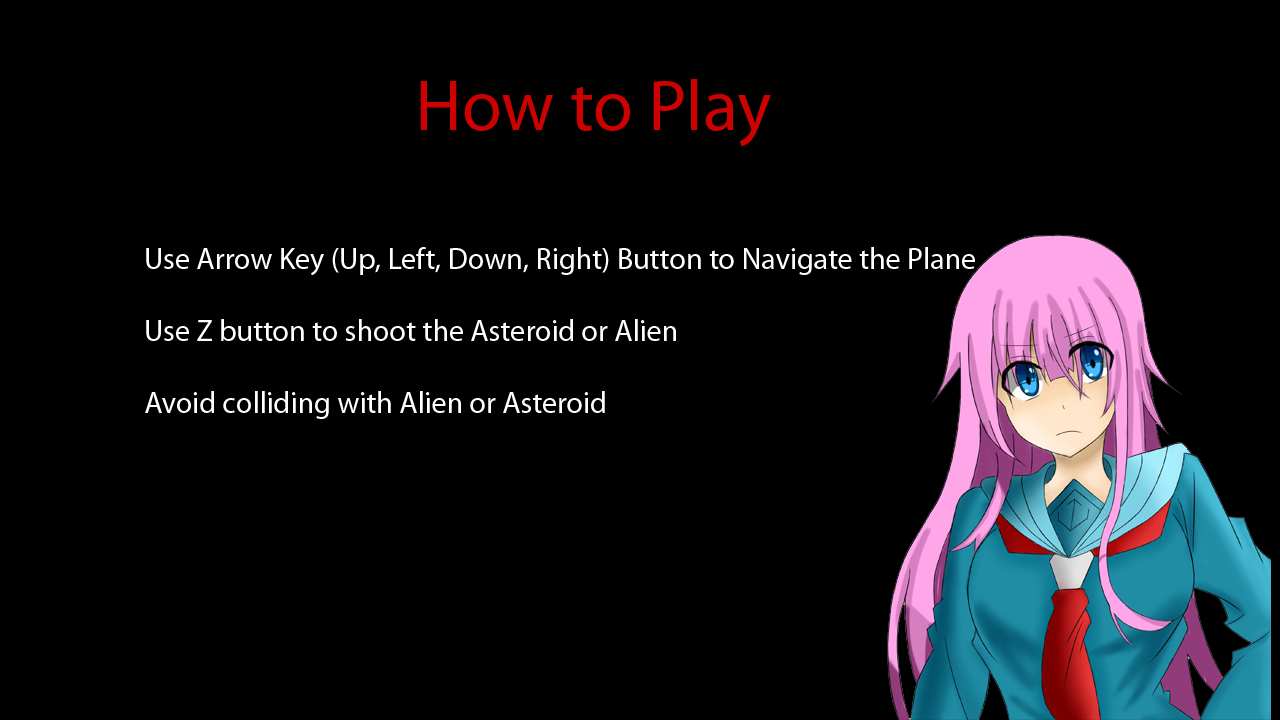
<style>
.page{position:relative;width:1280px;height:720px;background:#000000}
.page>*{position:absolute;margin:0}
.t1{font:72px "MyriadPro-Regular";color:#ce0101}
.t2{font:30px "MyriadPro-Regular";color:#ffffff}
</style>
<div class="page">
<p class="t1" style="left:420px;top:79px;width:351px;height:68px">How to Play</p>
<p class="t2" style="left:145px;top:247px;width:830px;height:172px">Use Arrow Key (Up, Left, Down, Right) Button to Navigate the Plane<br><br>Use Z button to shoot the Asteroid or Alien<br><br>Avoid colliding with Alien or Asteroid</p>
</div>
